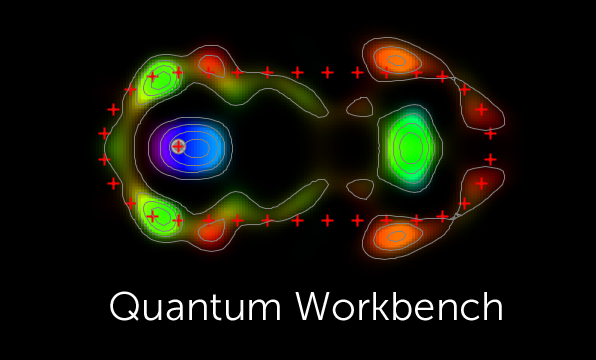
<style>
.page{position:relative;width:596px;height:360px;background:#000000}
.page>*{position:absolute;margin:0}
.t1{font:40px "MuseoSans-300";color:#ffffff}
</style>
<div class="page">
<p class="t1" style="left:110px;top:291px;width:392px;height:30px">Quantum Workbench</p>
</div>
